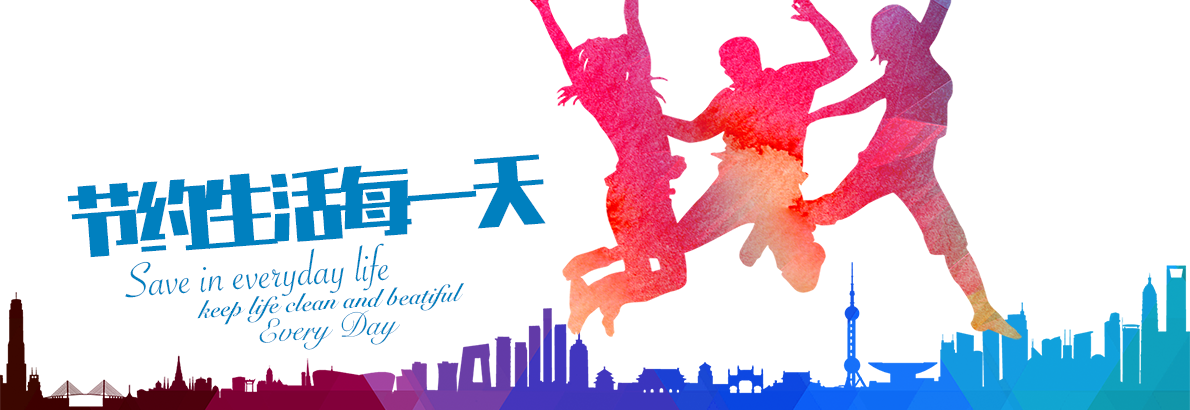
<style>
.page{position:relative;width:1190px;height:410px;background:#ffffff}
.page>*{position:absolute;margin:0}
.t1{font:75px "REEJI-JinGang-ExtraBoldGB1.0";letter-spacing:-0.1em;color:#0080bf}
.t2{font:51.6px "SavoyeLetPlain";color:#0080bf}
.t3{font:24.7px "SnellRoundhand-Bold";color:#0080bf}
.t4{font:32.9px "SnellRoundhand";color:#0080bf}
</style>
<div class="page">
<p class="t1" style="left:67px;top:154px;width:479px;height:104px;rotate:-4deg">节约生活每一天</p>
<p class="t2" style="left:125px;top:243px;width:264px;height:55px;rotate:-4deg">Save in everyday life</p>
<p class="t3" style="left:197px;top:283px;width:267px;height:42px;rotate:-4deg">keep life clean and beatiful</p>
<p class="t4" style="left:259px;top:310px;width:141px;height:40px;rotate:-4deg">Every Day</p>
</div>
